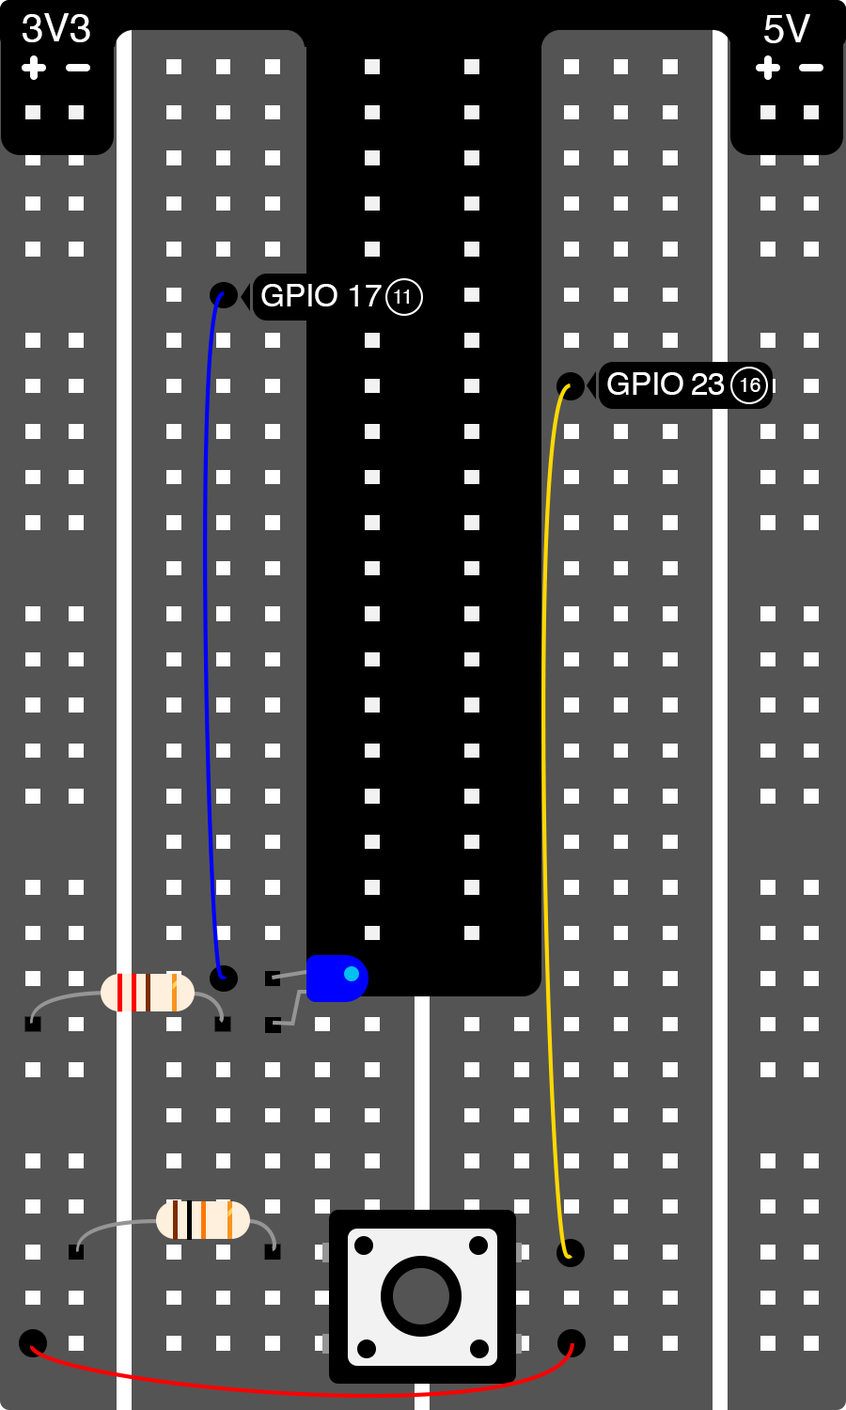
<style>
.page{position:relative;width:846px;height:1410px;background:#545454}
.page>*{position:absolute;margin:0}
.t1{font:39.2px "Helvetica";color:#ffffff}
.t2{font:31.3px "Helvetica";color:#ffffff}
.t3{font:19.6px "Helvetica";color:#ffffff}
</style>
<div class="page">
<p class="t1" style="left:23px;top:13px;width:67px;height:29px">3V3</p>
<p class="t1" style="left:764px;top:14px;width:46px;height:29px">5V</p>
<p class="t2" style="left:261px;top:284px;width:121px;height:22px">GPIO 17</p>
<p class="t3" style="left:394px;top:289px;width:15px;height:15px">11</p>
<p class="t2" style="left:607px;top:372px;width:118px;height:23px">GPIO 23</p>
<p class="t3" style="left:740px;top:378px;width:20px;height:14px">16</p>
</div>
